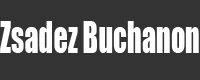
<style>
.page{position:relative;width:200px;height:80px;background:#333333}
.page>*{position:absolute;margin:0}
.t1{font:39.8px "Impact";color:#ffffff;scale:0.71 1}
</style>
<div class="page">
<p class="t1" style="left:0px;top:21px;width:199px;height:32px">Zsadez Buchanon</p>
</div>
